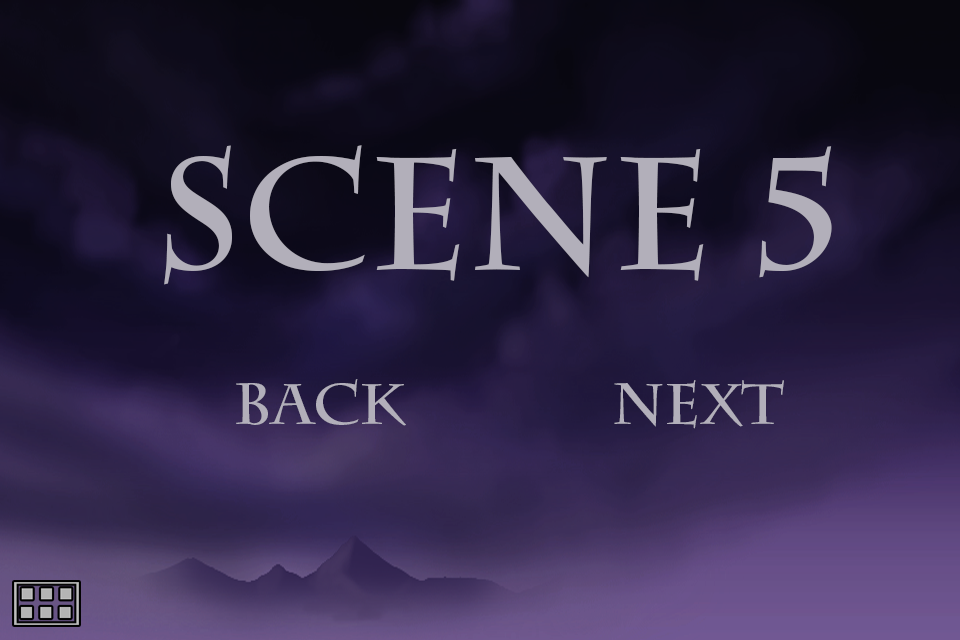
<style>
.page{position:relative;width:960px;height:640px}
.page>*{position:absolute;margin:0}
.t1{font:158px "CharlemagneStd-Bold";color:#b2afba}
.t2{font:57.7px "CharlemagneStd-Bold";color:#b2afba}
</style>
<div class="page">
<p class="t1" style="left:164px;top:145px;width:668px;height:140px">scene 5</p>
<p class="t2" style="left:236px;top:379px;width:170px;height:47px">back</p>
<p class="t2" style="left:614px;top:380px;width:170px;height:49px">Next</p>
</div>
